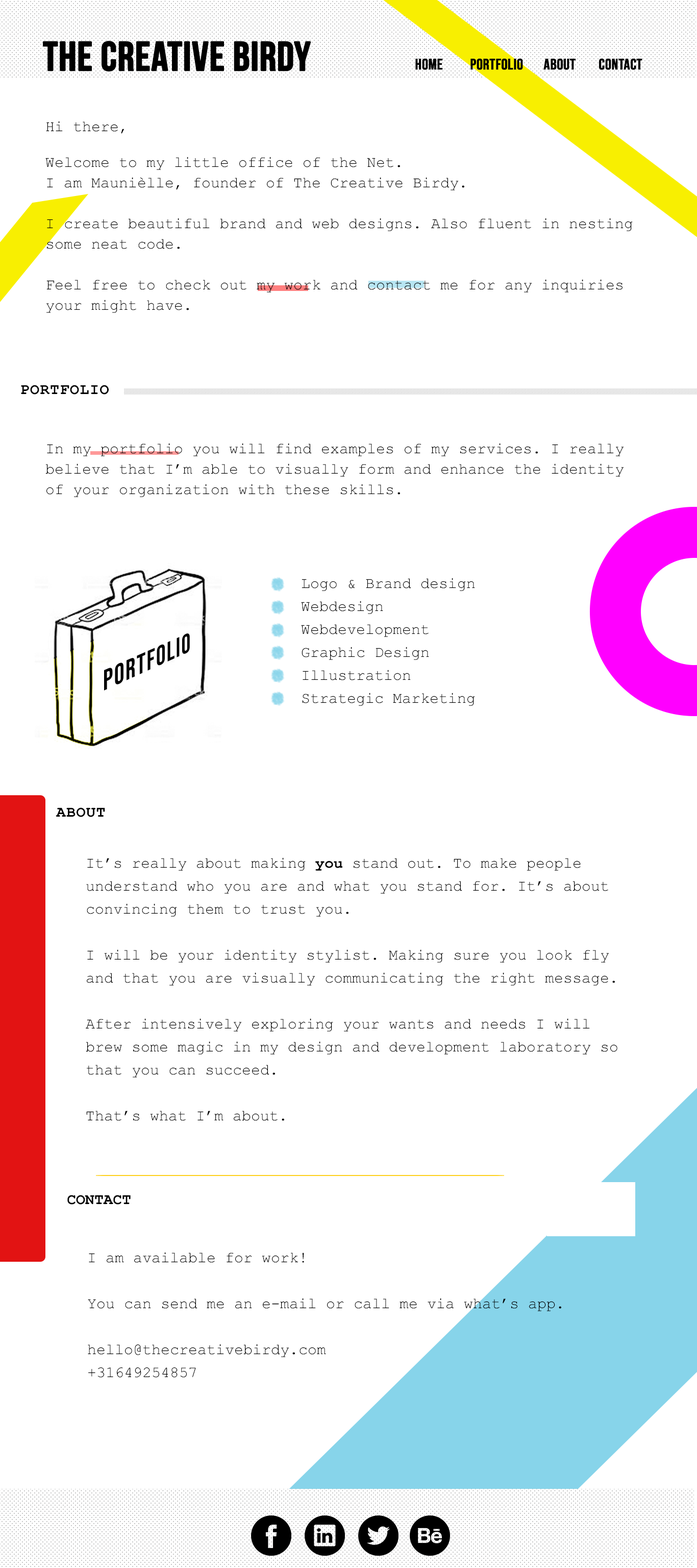
<style>
.page{position:relative;width:697px;height:1568px;background:#ffffff}
.page>*{position:absolute;margin:0}
.t1{font:40.8px "BebasNeue";color:#000000;font-weight:bold}
.t2{font:15.3px "BebasNeue-Regular";color:#000000;text-transform:uppercase;font-weight:bold}
.t3{font:15.3px/20.4px "CourierNewPSMT";color:#000000}
.t4{font:15.3px/15.3px "CourierNewPSMT";color:#000000}
.t5{font:15.3px/28.1px "CourierNewPSMT";letter-spacing:0.05em;color:#000000}
.t6{font:15.3px "CourierNewPS-BoldMT";letter-spacing:0.05em;color:#000000}
.t7{font:15.3px/23px "CourierNewPSMT";color:#000000}
.t8{font:15.3px/23px "CourierNewPSMT";letter-spacing:0.05em;color:#000000}
.t9{font:15.3px/23px "CourierNewPS-BoldMT";color:#000000}
.t10{font:15.3px "CourierNewPS-BoldMT";color:#000000}
</style>
<div class="page">
<p class="t1" style="left:43px;top:41px;width:268px;height:30px">THE CREATIVE BIRDY</p>
<p class="t2" style="left:415px;top:58px;width:228px;height:12px">home   PORTFOLIO  about   contact</p>
<p class="t3" style="left:45px;top:121px;width:588px;height:192px">Hi there,<span class="t4"><br> <br>Welcome to m</span>y little office of the Net.<br>I am Maunièlle, founder of The Creative Birdy.<br><br>I create beautiful brand and web designs. Also fluent in nesting some neat code.<br><br>Feel free to check out my work and contact me for any inquiries your might have.<br><span class="t5"></span></p>
<p class="t6" style="left:21px;top:385px;width:88px;height:10px">PORTFOLIO</p>
<p class="t3" style="left:45px;top:443px;width:579px;height:54px">In my portfolio you will find examples of my services. I really believe that I’m able to visually form and enhance the identity of your organization with these skills.</p>
<p class="t7" style="left:301px;top:578px;width:174px;height:128px">Logo &amp; Brand design<br>Webdesign<br>Webdevelopment<br>Graphic Design<br>Illustration<br>Strategic Marketing<br><span class="t8"></span></p>
<p class="t6" style="left:56px;top:807px;width:49px;height:10px">ABOUT</p>
<p class="t7" style="left:86px;top:857px;width:532px;height:264px">It’s really about making <span class="t9">you</span> stand out. To make people <br>understand who you are and what you stand for. It’s about convincing them to trust you. <br><br>I will be your identity stylist. Making sure you look fly <br>and that you are visually communicating the right message. <br><br>After intensively exploring your wants and needs I will brew some magic in my design and development laboratory so that you can succeed.<br><br>That’s what I’m about.</p>
<p class="t10" style="left:67px;top:1195px;width:64px;height:10px">CONTACT</p>
<p class="t7" style="left:88px;top:1252px;width:473px;height:126px">I am available for work!<br><br>You can send me an e-mail or call me via what’s app.<br><br>hello@thecreativebirdy.com<br>+31649254857</p>
</div>
